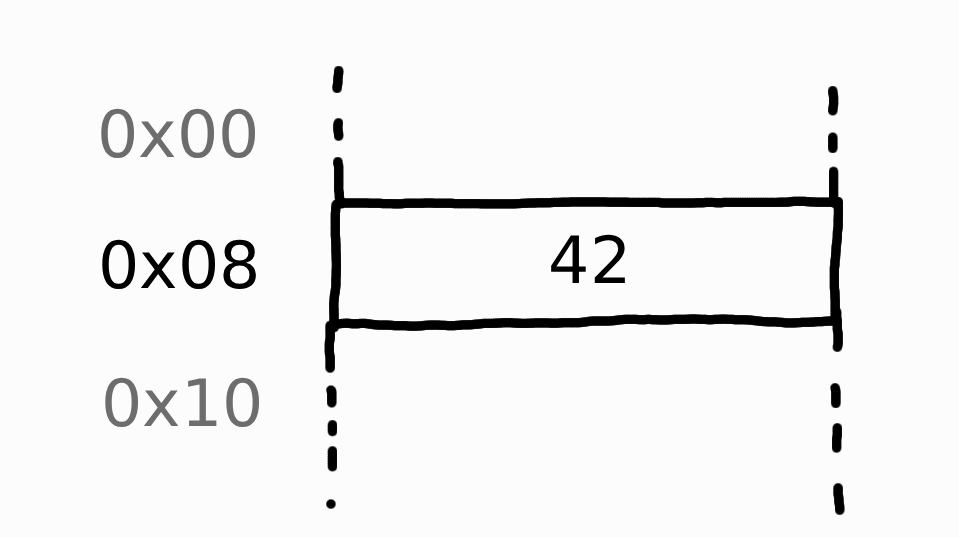
<style>
.page{position:relative;width:959px;height:537px;background:#fcfcfc}
.page>*{position:absolute;margin:0}
.t1{font:65px "DejaVuSans";color:#6d6d6d}
.t2{font:65px "DejaVuSans";color:#000000}
</style>
<div class="page">
<p class="t1" style="left:101px;top:108px;width:155px;height:50px">0x00</p>
<p class="t2" style="left:102px;top:239px;width:154px;height:50px">0x08</p>
<p class="t2" style="left:551px;top:234px;width:74px;height:49px">42</p>
<p class="t1" style="left:105px;top:377px;width:155px;height:50px">0x10</p>
</div>
